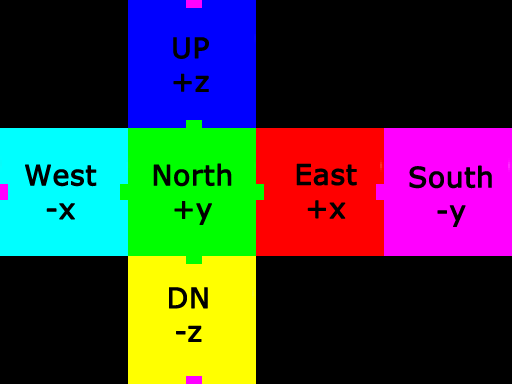
<style>
.page{position:relative;width:512px;height:384px;background:#000000}
.page>*{position:absolute;margin:0}
.t1{font:28px "Verdana";color:#000000;font-weight:bold}
</style>
<div class="page">
<p class="t1" style="left:173px;top:37px;width:36px;height:55px;text-align:center">UP<br>+z</p>
<p class="t1" style="left:25px;top:164px;width:72px;height:56px;text-align:center">West<br>-x</p>
<p class="t1" style="left:153px;top:163px;width:79px;height:62px;text-align:center">North<br>+y</p>
<p class="t1" style="left:296px;top:163px;width:61px;height:56px;text-align:center">East<br>+x</p>
<p class="t1" style="left:409px;top:165px;width:83px;height:62px;text-align:center">South<br>-y</p>
<p class="t1" style="left:169px;top:287px;width:39px;height:55px;text-align:center">DN<br>-z</p>
</div>
